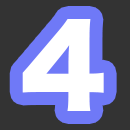
<style>
.page{position:relative;width:130px;height:130px;background:#333333}
.page>*{position:absolute;margin:0}
.t1{font:110.5px "HiraKakuStdN-W8";color:#ffffff}
</style>
<div class="page">
<p class="t1" style="left:22px;top:19px;width:82px;height:92px">４</p>
</div>
